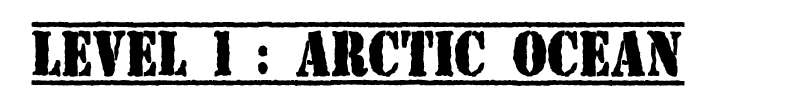
<style>
.page{position:relative;width:800px;height:102px;background:#ffffff}
.page>*{position:absolute;margin:0}
.t1{font:64.9px "TopSecret";letter-spacing:-0.02em;color:#000000;text-transform:uppercase;font-weight:bold;scale:0.8 1}
</style>
<div class="page">
<p class="t1" style="left:31px;top:21px;width:654px;height:65px">level 1 : arctic ocean</p>
</div>
